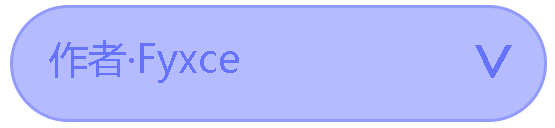
<style>
.page{position:relative;width:555px;height:128px;background:#b5bbff}
.page>*{position:absolute;margin:0}
.t1{font:39px "MicrosoftYaHeiUI";color:#6673ff}
.t2{font:73px "MicrosoftYaHeiUI";color:#6673ff}
</style>
<div class="page">
<p class="t1" style="left:49px;top:40px;width:190px;height:43px">作者·Fyxce</p>
<p class="t2" style="left:475px;top:45px;width:37px;height:33px;rotate:90deg">&gt;</p>
</div>
